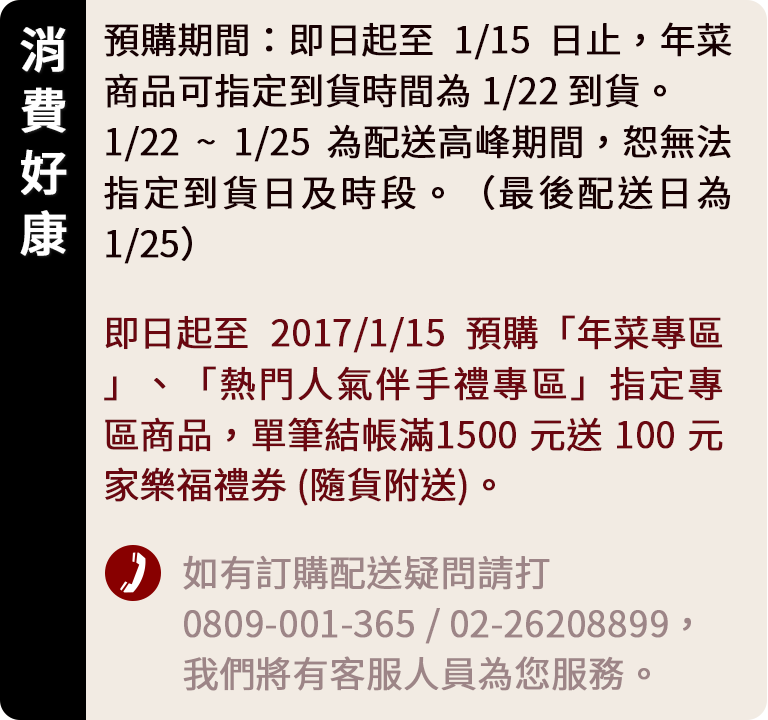
<style>
.page{position:relative;width:768px;height:720px;background:#f2ebe3}
.page>*{position:absolute;margin:0}
.t1{font:48px/61.4px "NotoSansCJKtc-Medium";letter-spacing:0.08em;color:#ffffff;font-weight:bold}
.t2{font:36px/50.8px "NotoSansCJKtc-DemiLight";color:#1b0103;font-weight:bold}
.t3{font:36px/50.8px "NotoSansCJKtc-DemiLight";color:#6a0710;font-weight:bold}
.t4{font:36px/50.8px "NotoSansCJKtc-DemiLight";color:#9d8587;font-weight:bold}
</style>
<div class="page">
<p class="t1" style="left:20px;top:26px;width:47px;height:230px">消<br>費<br>好<br>康</p>
<p class="t2" style="left:104px;top:22px;width:628px;height:242px;text-align:justify">預購期間：即日起至 1/15 日止，年菜商品可指定到貨時間為 1/22 到貨。<br>1/22 ~ 1/25 為配送高峰期間，恕無法指定到貨日及時段。（最後配送日為1/25）</p>
<p class="t3" style="left:104px;top:315px;width:619px;height:191px;text-align:justify">即日起至 2017/1/15 預購「年菜專區」、「熱門人氣伴手禮專區」指定專區商品，單筆結帳滿1500 元送 100 元家樂福禮券 (隨貨附送)。</p>
<p class="t4" style="left:183px;top:555px;width:508px;height:136px">如有訂購配送疑問請打 0809-001-365 / 02-26208899，我們將有客服人員為您服務。</p>
</div>
